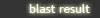
<style>
.page{position:relative;width:100px;height:18px;background:#333333}
.page>*{position:absolute;margin:0}
.t1{font:12px "TrebuchetMS";color:#ffffff}
</style>
<div class="page">
<p class="t1" style="left:29px;top:4px;width:61px;height:9px">blast result</p>
</div>
